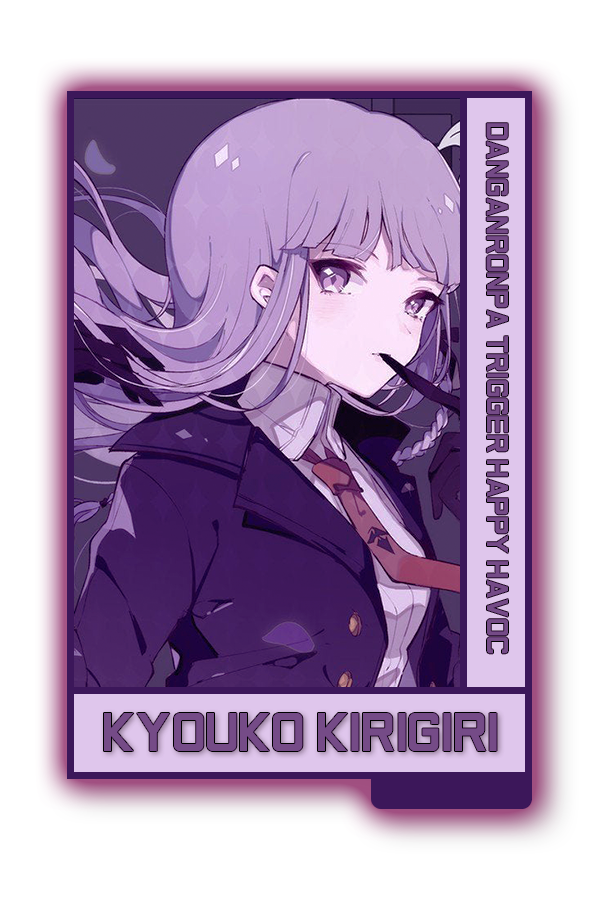
<style>
.page{position:relative;width:600px;height:900px;background:#ffffff}
.page>*{position:absolute;margin:0}
.t1{font:25.9px "GRATIS";color:#67507e}
.t2{font:46.9px "GRATIS";color:#67507e}
</style>
<div class="page">
<p class="t1" style="left:486px;top:123px;width:22px;height:531px;rotate:90deg">DANGANRONPA TRIGGER HAPPY HAVOC</p>
<p class="t2" style="left:104px;top:713px;width:393px;height:38px">KYOUKO KIRIGIRI</p>
</div>
